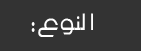
<style>
.page{position:relative;width:141px;height:51px;background:#333333}
.page>*{position:absolute;margin:0}
.t1{font:34.5px "MO_Nawel";letter-spacing:-0.08em;color:#ffffff;scale:0.91 1}
.t2{font:44.5px "MO_Nawel";letter-spacing:-0.08em;color:#ffffff;scale:0.7 1}
</style>
<div class="page">
<p class="t1" style="left:38px;top:13px;width:55px;height:24px">ا  لنو ع</p>
<p class="t2" style="left:31px;top:22px;width:4px;height:10px">:</p>
</div>
